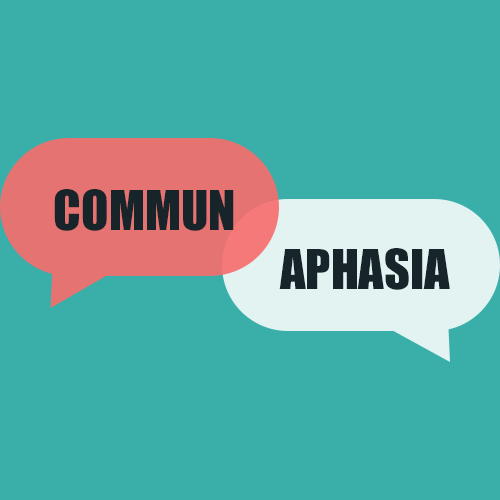
<style>
.page{position:relative;width:500px;height:500px;background:#3aafa9}
.page>*{position:absolute;margin:0}
.t1{font:50.8px "Impact";color:#17242a}
</style>
<div class="page">
<p class="t1" style="left:54px;top:189px;width:180px;height:42px">COMMUN</p>
<p class="t1" style="left:279px;top:248px;width:171px;height:42px">APHASIA</p>
</div>
